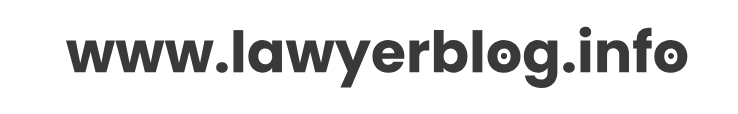
<style>
.page{position:relative;width:738px;height:114px;background:#ffffff}
.page>*{position:absolute;margin:0}
.t1{font:57px "Poppins-Bold";color:#393939}
</style>
<div class="page">
<p class="t1" style="left:66px;top:26px;width:622px;height:62px">www.lawyerblog.info</p>
</div>
